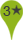
<style>
.page{position:relative;width:23px;height:40px;background:#ffffff}
.page>*{position:absolute;margin:0}
.t1{font:14px "ArialMT";letter-spacing:0.025em;color:#3c3c3c}
</style>
<div class="page">
<p class="t1" style="left:3px;top:6px;width:8px;height:10px">3</p>
</div>
